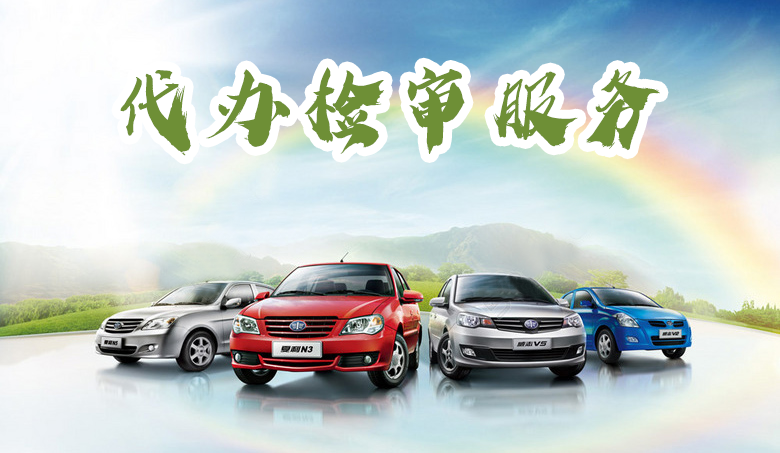
<style>
.page{position:relative;width:780px;height:453px}
.page>*{position:absolute;margin:0}
.t1{font:92.7px "REEJI-CHAO-ChufengGB-Regular";letter-spacing:0.1em;color:#6e8f36;text-transform:uppercase;scale:0.92 1}
</style>
<div class="page">
<p class="t1" style="left:120px;top:66px;width:540px;height:90px">代办检审服务</p>
</div>
